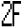
<style>
.page{position:relative;width:25px;height:28px;background:#ffffff}
.page>*{position:absolute;margin:0}
.t1{font:36px "Photoshop Large";letter-spacing:-0.025em;color:#000000}
</style>
<div class="page">
<p class="t1" style="left:1px;top:1px;width:20px;height:26px">2F</p>
</div>
